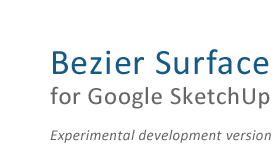
<style>
.page{position:relative;width:280px;height:150px;background:#ffffff}
.page>*{position:absolute;margin:0}
.t1{font:15px "Calibri-Italic";letter-spacing:0.025em;color:#666666}
.t2{font:36px "Calibri";letter-spacing:0.025em;color:#135a88}
.t3{font:25px "Calibri";letter-spacing:0.025em;color:#666666}
</style>
<div class="page">
<p class="t1" style="left:50px;top:49px;width:221px;height:94px"><span class="t2">Bezier Surface<br></span><span class="t3">for Google SketchUp<br><br></span>Experimental development version</p>
</div>
